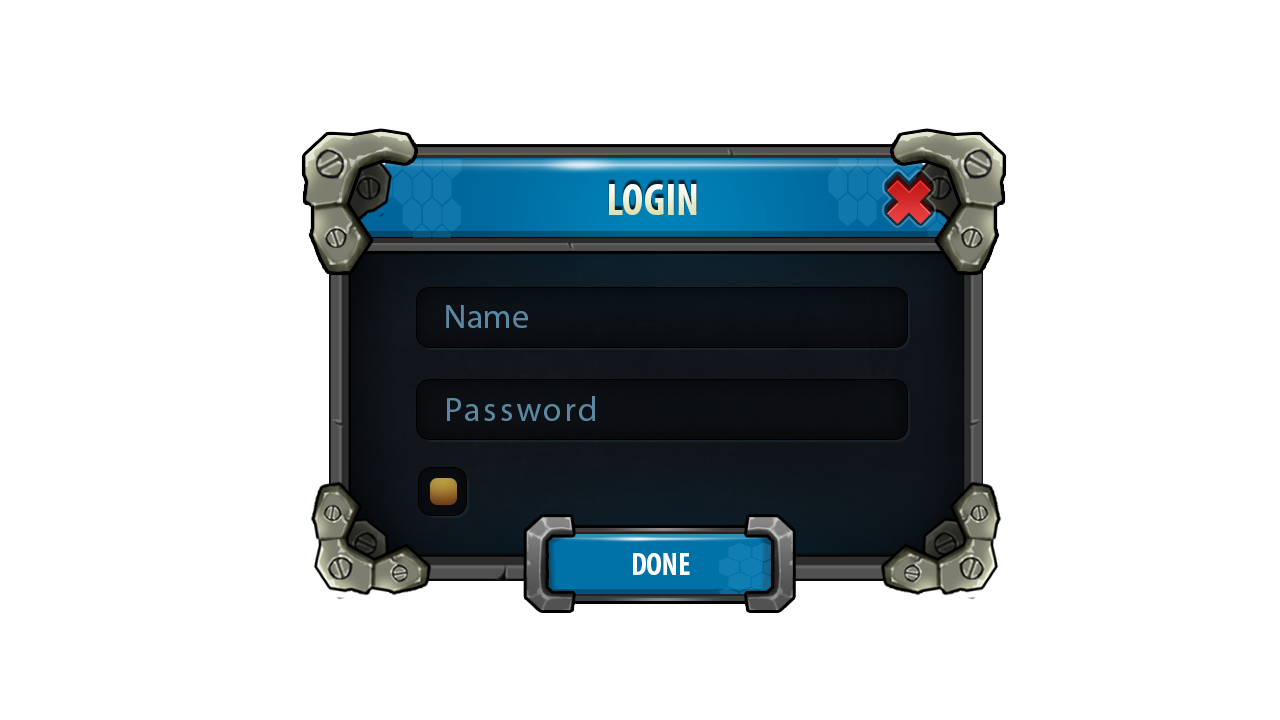
<style>
.page{position:relative;width:1280px;height:720px;background:#ffffff}
.page>*{position:absolute;margin:0}
.t1{font:45px "MyriadPro-BoldCond";text-transform:uppercase}
.t2{font:34.1px "MyriadPro-Regular";color:#5c88a2}
.t3{font:34.1px "MyriadPro-Regular";letter-spacing:0.08em;color:#5c88a2}
.t4{font:31.5px "MyriadPro-BoldCond";color:#ffffff;text-transform:uppercase}
</style>
<div class="page">
<p class="t1" style="left:609px;top:184px;width:88px;height:31px">Login</p>
<p class="t2" style="left:446px;top:305px;width:82px;height:23px">Name</p>
<p class="t3" style="left:447px;top:396px;width:148px;height:25px">Password</p>
<p class="t4" style="left:633px;top:553px;width:57px;height:22px">Done</p>
</div>
